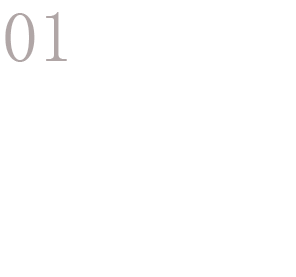
<style>
.page{position:relative;width:296px;height:277px;background:#ffffff}
.page>*{position:absolute;margin:0}
.t1{font:72px "SimSun";color:#b0a6a6}
</style>
<div class="page">
<p class="t1" style="left:5px;top:12px;width:62px;height:50px">01</p>
</div>
